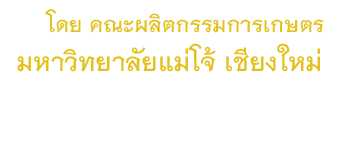
<style>
.page{position:relative;width:337px;height:149px;background:#ffffff}
.page>*{position:absolute;margin:0}
.t1{font:30px "THNiramitAS-Bold";color:#e4c11c}
.t2{font:36px "THNiramitAS-Bold";color:#e4c11c}
</style>
<div class="page">
<p class="t1" style="left:45px;top:9px;width:279px;height:24px">โดย คณะผลิตกรรมการเกษตร</p>
<p class="t2" style="left:17px;top:43px;width:303px;height:29px">มหาวิทยาลัยแม่โจ้ เชียงใหม่</p>
</div>
